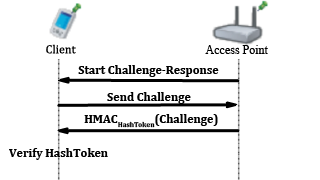
<style>
.page{position:relative;width:320px;height:180px;background:#ffffff}
.page>*{position:absolute;margin:0}
.t1{font:12px "CambriaMath";color:#000000}
.t2{font:12px "TimesNewRomanPSMT";color:#000000}
.t3{font:12px "Cambria-Bold";color:#000000}
</style>
<div class="page">
<p class="t1" style="left:46px;top:44px;width:30px;height:10px">Client</p>
<p class="t2" style="left:205px;top:45px;width:63px;height:9px">Access Point</p>
<p class="t3" style="left:78px;top:65px;width:141px;height:12px">Start Challenge-Response</p>
<p class="t3" style="left:107px;top:92px;width:84px;height:12px">Send Challenge</p>
<p class="t3" style="left:84px;top:114px;width:134px;height:14px">HMACHashToken(Challenge)</p>
<p class="t3" style="left:9px;top:148px;width:99px;height:12px">Verify HashToken</p>
</div>
